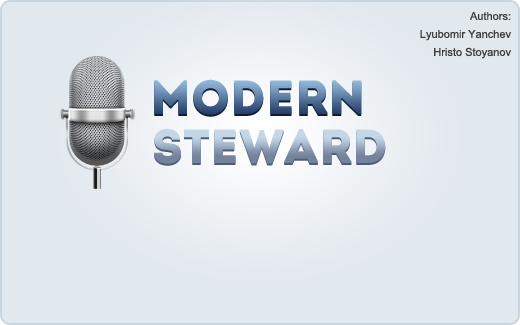
<style>
.page{position:relative;width:520px;height:325px;background:#e1e8ee}
.page>*{position:absolute;margin:0}
.t1{font:11px/18px "ArialMT";color:#3c3c3c}
.t2{font:48px "Intro"}
</style>
<div class="page">
<p class="t1" style="left:420px;top:12px;width:91px;height:47px;text-align:right">Authors:<br>Lyubomir Yanchev<br>Hristo Stoyanov</p>
<p class="t2" style="left:154px;top:81px;width:208px;height:36px">Modern</p>
<p class="t2" style="left:154px;top:79px;width:208px;height:36px">Modern</p>
<p class="t2" style="left:154px;top:130px;width:232px;height:36px">Steward</p>
<p class="t2" style="left:154px;top:128px;width:232px;height:36px">Steward</p>
</div>
